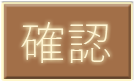
<style>
.page{position:relative;width:134px;height:82px;background:#a26f48}
.page>*{position:absolute;margin:0}
.t1{font:45.8px "YuGothicUI-Light";color:#fff5d3}
</style>
<div class="page">
<p class="t1" style="left:21px;top:22px;width:89px;height:41px">確認</p>
</div>
